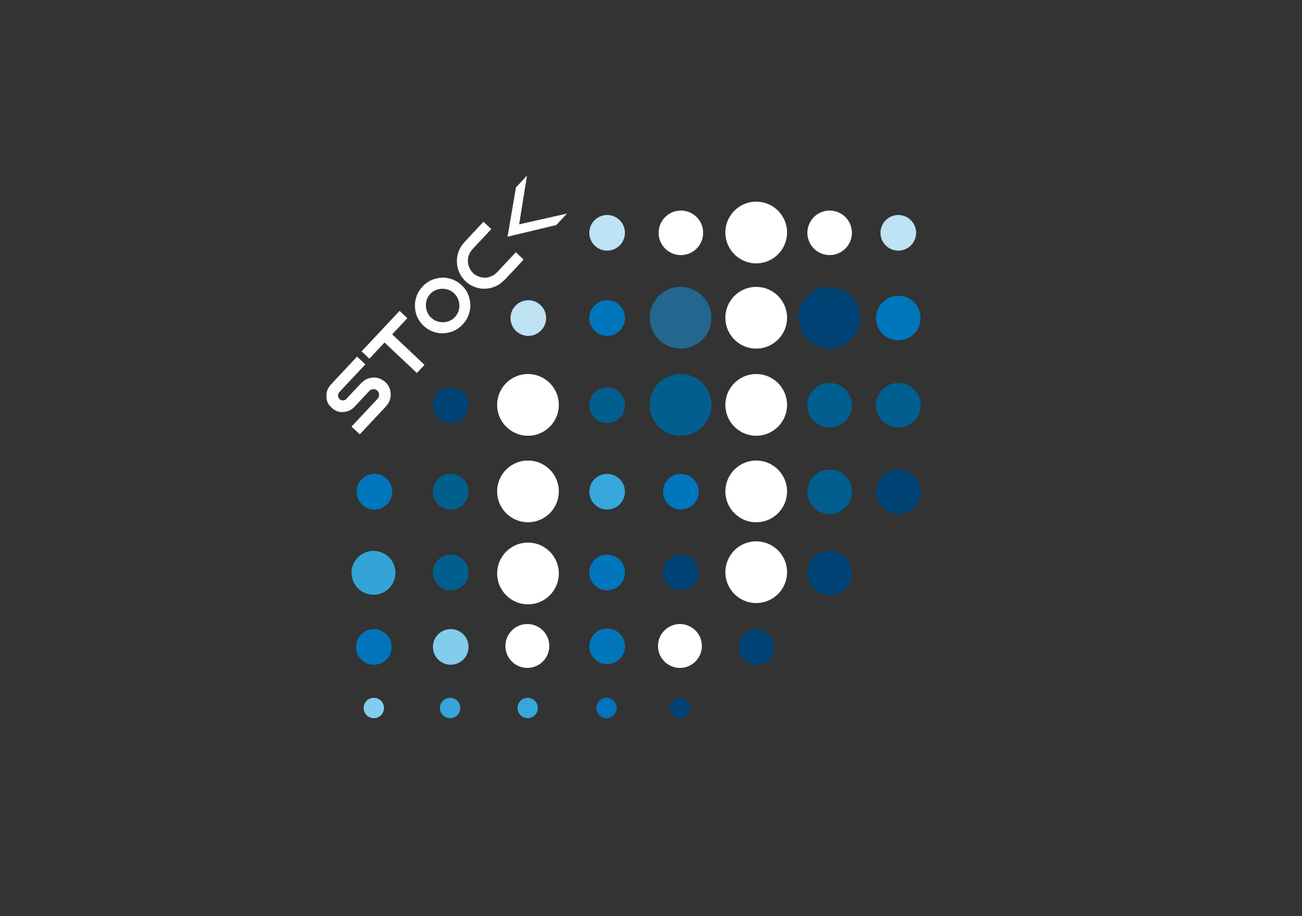
<style>
.page{position:relative;width:1302px;height:916px;background:#333333}
.page>*{position:absolute;margin:0}
.t1{font:78.5px "Android";color:#fefefe}
</style>
<div class="page">
<p class="t1" style="left:326px;top:176px;width:241px;height:258px;rotate:-47deg">STOCK</p>
</div>
